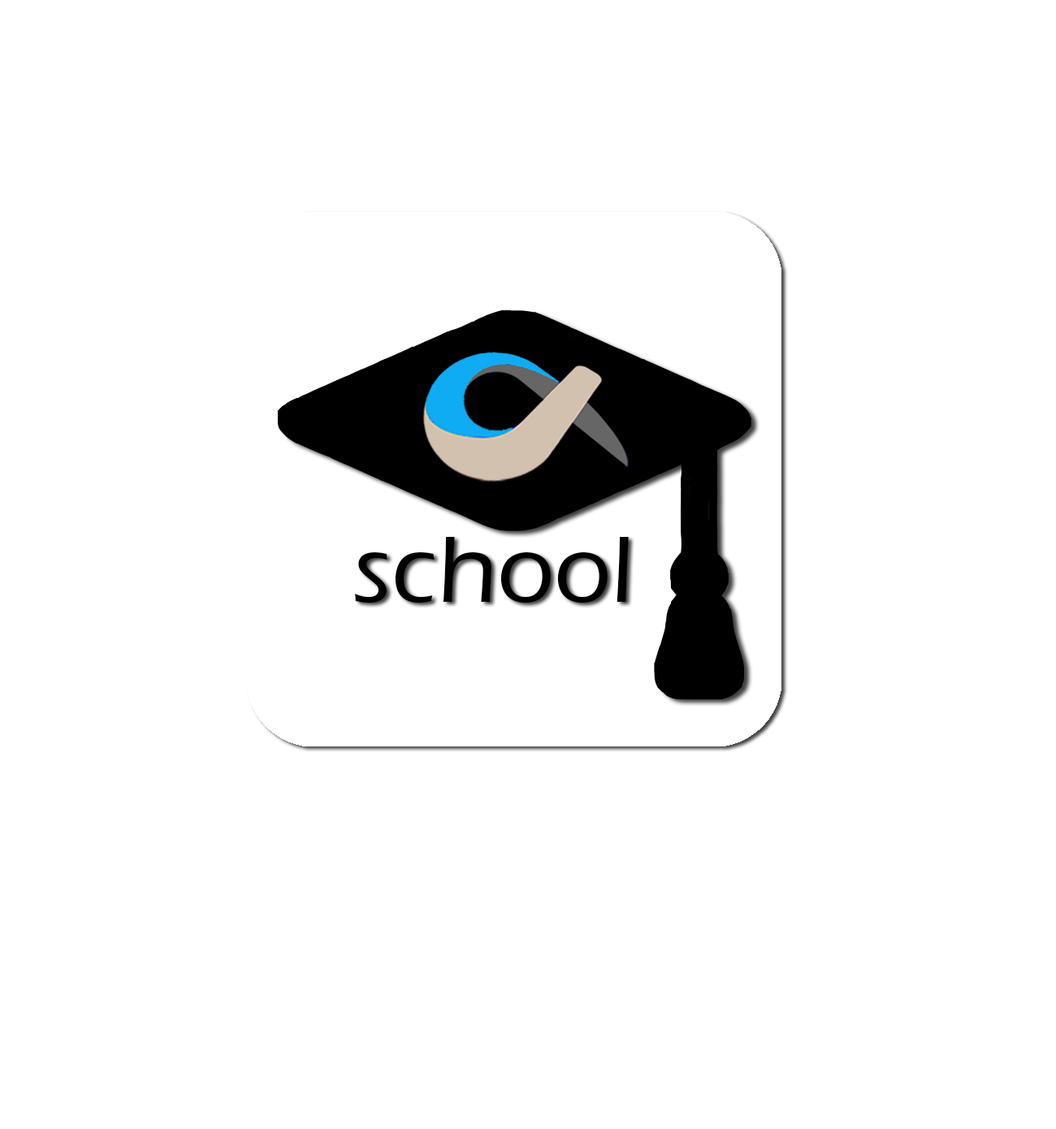
<style>
.page{position:relative;width:1056px;height:1129px;background:#ffffff}
.page>*{position:absolute;margin:0}
.t1{font:97.5px "ErasITC-Medium";color:#000000}
</style>
<div class="page">
<p class="t1" style="left:355px;top:537px;width:274px;height:66px">school</p>
</div>
